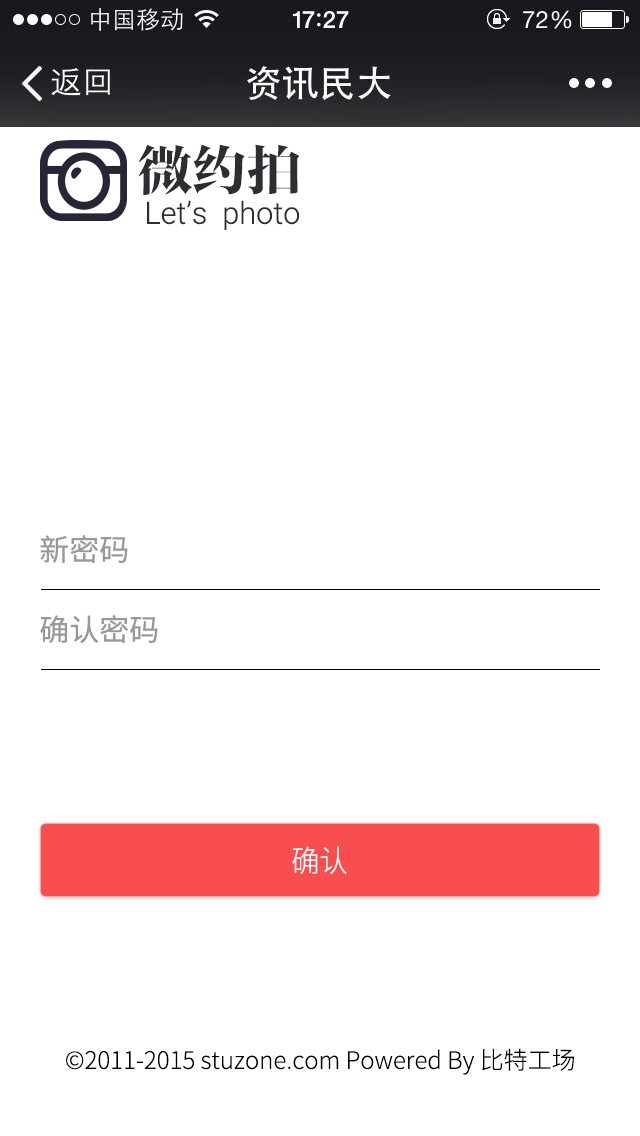
<style>
.page{position:relative;width:640px;height:1136px;background:#ffffff}
.page>*{position:absolute;margin:0}
.t1{font:54.5px "FZFYSJW--GB1-0";color:#2e2d32}
.t2{font:30.7px "Roboto-Light";color:#2e2d32}
.t3{font:30px "NotoSansHans-Regular";color:#999999}
.t4{font:30px "NotoSansHans-Light";color:#ffffff;scale:0.94 1}
.t5{font:24px "NotoSansHans-Light";color:#000000}
</style>
<div class="page">
<p class="t1" style="left:138px;top:144px;width:162px;height:51px">微约拍</p>
<p class="t2" style="left:147px;top:200px;width:152px;height:30px">Let’s  photo</p>
<p class="t3" style="left:40px;top:535px;width:88px;height:28px">新密码</p>
<p class="t3" style="left:40px;top:615px;width:118px;height:28px">确认密码</p>
<p class="t4" style="left:292px;top:846px;width:55px;height:28px">确认</p>
<p class="t5" style="left:66px;top:1048px;width:508px;height:27px">©2011-2015 stuzone.com Powered By 比特工场</p>
</div>
